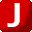
<style>
.page{position:relative;width:32px;height:32px;background:#d40000}
.page>*{position:absolute;margin:0}
.t1{font:34.5px "WorldofWater-Regular";color:#fefefe}
</style>
<div class="page">
<p class="t1" style="left:7px;top:3px;width:13px;height:24px">J</p>
</div>
